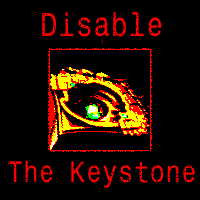
<style>
.page{position:relative;width:200px;height:200px;background:#000000}
.page>*{position:absolute;margin:0}
.t1{font:27px "MonospaceTypewriter";color:#ff0000}
.t2{font:30px "MonospaceTypewriter";color:#ff0000}
.t3{font:5px "MonospaceTypewriter";color:#ff0000}
</style>
<div class="page">
<p class="t1" style="left:8px;top:12px;width:187px;height:176px;text-align:center"><span class="t2">Disable<br></span><span class="t3">j<br><br><br><br><br><br><br><br><br><br><br><br><br><br><br><br><br><br><br></span>The Keystone</p>
</div>
